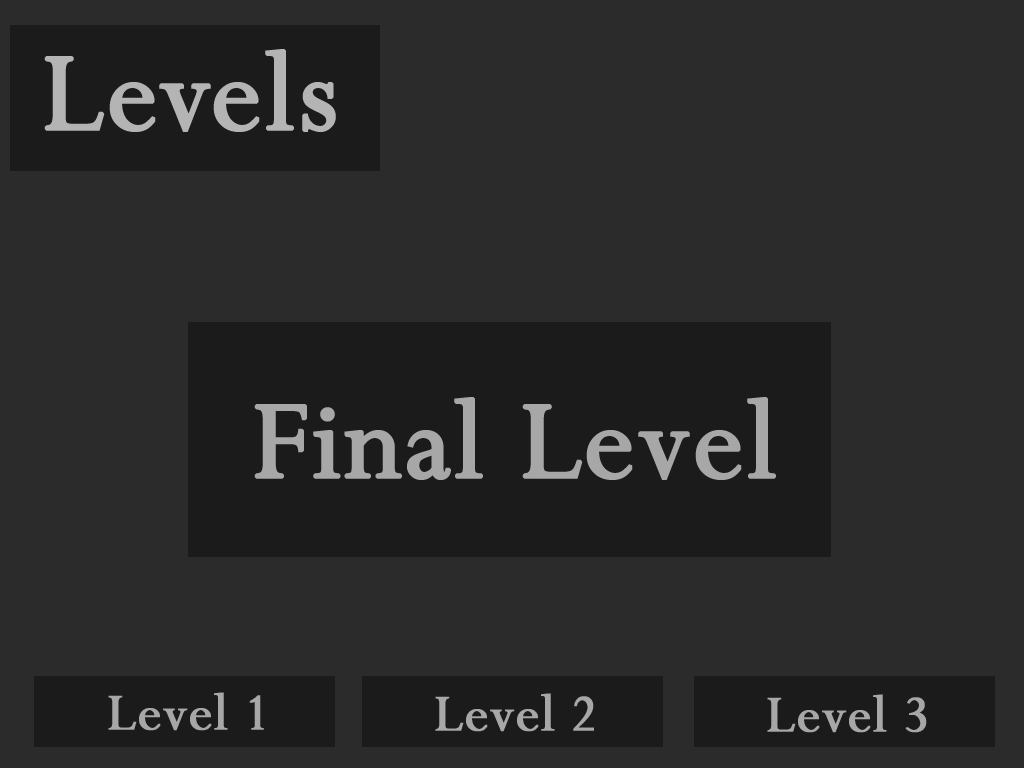
<style>
.page{position:relative;width:1024px;height:768px;background:#2a2b2a}
.page>*{position:absolute;margin:0}
.t1{font:124.5px "Perpetua";color:#b4b4b4;font-weight:bold}
.t2{font:124.5px "Perpetua";color:#a7a7a7;font-weight:bold}
.t3{font:58.1px "Perpetua";color:#a7a7a7;font-weight:bold}
</style>
<div class="page">
<p class="t1" style="left:44px;top:49px;width:292px;height:83px">Levels</p>
<p class="t2" style="left:254px;top:397px;width:522px;height:83px">Final Level</p>
<p class="t3" style="left:108px;top:692px;width:156px;height:39px">Level 1</p>
<p class="t3" style="left:435px;top:693px;width:159px;height:39px">Level 2</p>
<p class="t3" style="left:767px;top:694px;width:160px;height:39px">Level 3</p>
</div>
